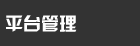
<style>
.page{position:relative;width:140px;height:46px;background:#333333}
.page>*{position:absolute;margin:0}
.t1{font:18px "JLinXin";color:#ffffff}
</style>
<div class="page">
<p class="t1" style="left:6px;top:15px;width:71px;height:17px">平台管理</p>
</div>
